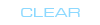
<style>
.page{position:relative;width:100px;height:25px;background:#ffffff}
.page>*{position:absolute;margin:0}
.t1{font:14px "MicrogrammaD-MediExte";letter-spacing:0.075em;color:#8dd9ff}
</style>
<div class="page">
<p class="t1" style="left:21px;top:8px;width:59px;height:9px">CLEAR</p>
</div>
